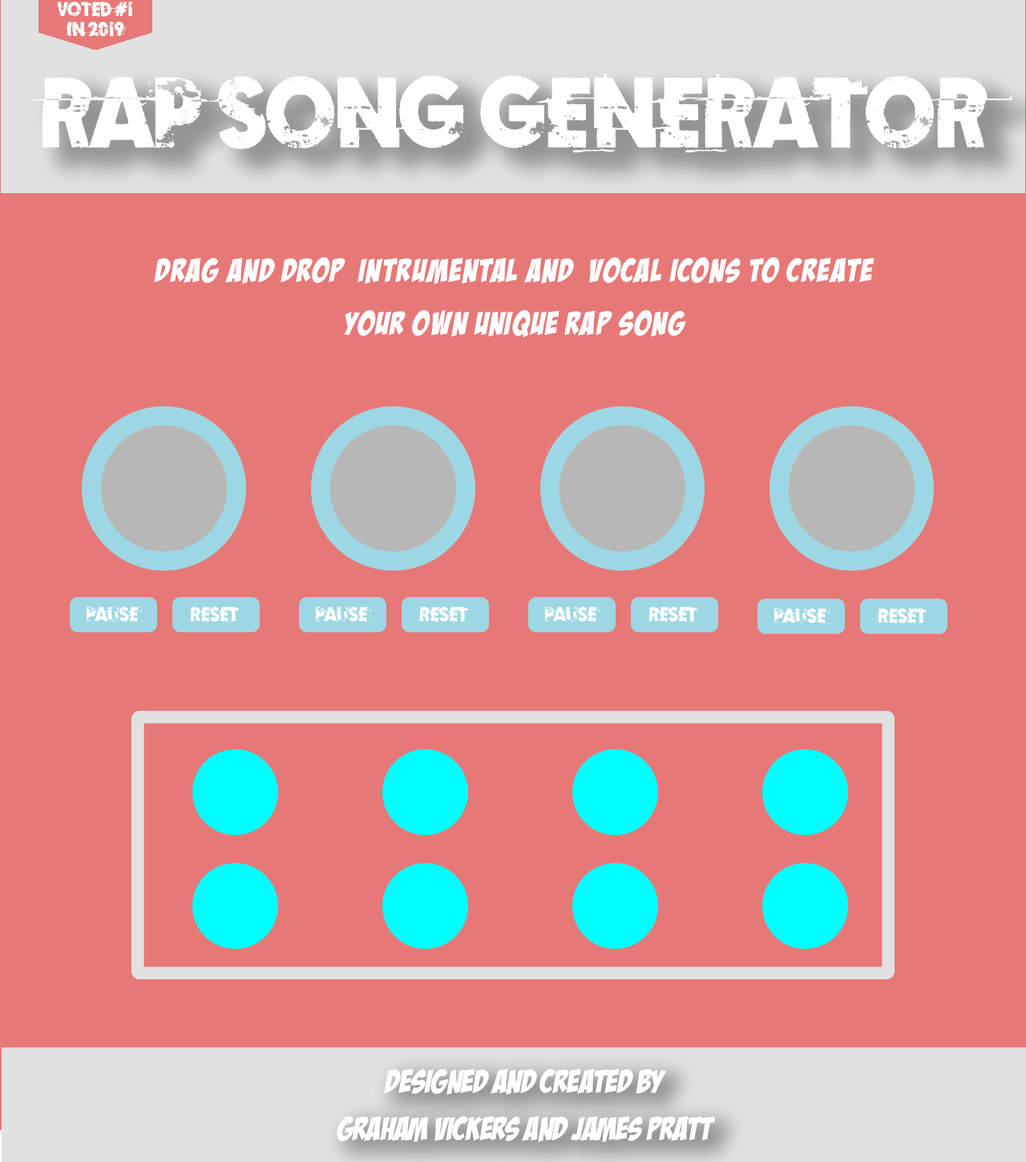
<style>
.page{position:relative;width:1026px;height:1162px;background:#e77878}
.page>*{position:absolute;margin:0}
.t1{font:20px/20px "Examplesoferosion";letter-spacing:-0.04em;color:#ffffff;text-transform:uppercase}
.t2{font:100.2px "Examplesoferosion";letter-spacing:-0.04em;color:#ffffff;text-transform:uppercase}
.t3{font:33.4px/53.4px "BadaBoomBB";letter-spacing:0.01em;color:#ffffff;text-transform:uppercase}
.t4{font:20px "Examplesoferosion";letter-spacing:-0.04em;color:#ffffff;text-transform:uppercase}
.t5{font:33.4px/46.8px "BadaBoomBB";letter-spacing:-0.04em;color:#ffffff;text-transform:uppercase}
</style>
<div class="page">
<p class="t1" style="left:57px;top:1px;width:75px;height:36px;text-align:center">VOTED #1  <br>in 2019</p>
<p class="t2" style="left:31px;top:74px;width:981px;height:79px">Rap Song Generator</p>
<p class="t3" style="left:154px;top:257px;width:720px;height:81px;text-align:center">Drag and drop  Intrumental and  vocal icons to create  <br>your own unique Rap Song</p>
<p class="t4" style="left:86px;top:606px;width:57px;height:17px">PAUse</p>
<p class="t4" style="left:188px;top:606px;width:51px;height:17px">RESET</p>
<p class="t4" style="left:315px;top:606px;width:58px;height:17px">PAUse</p>
<p class="t4" style="left:418px;top:606px;width:50px;height:17px">RESET</p>
<p class="t4" style="left:544px;top:606px;width:58px;height:17px">PAUse</p>
<p class="t4" style="left:647px;top:606px;width:50px;height:17px">RESET</p>
<p class="t4" style="left:773px;top:608px;width:58px;height:16px">PAUse</p>
<p class="t4" style="left:876px;top:608px;width:51px;height:16px">RESET</p>
<p class="t5" style="left:337px;top:1068px;width:378px;height:74px;text-align:center">DESIGNED AND CREATED BY<br>GRAHAM VICKERS AND JAMES PRATT</p>
</div>
